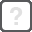
<style>
.page{position:relative;width:32px;height:32px;background:#ffffff}
.page>*{position:absolute;margin:0}
.t1{font:24.5px "Helvetica-Bold";color:#e1e1e1}
</style>
<div class="page">
<p class="t1" style="left:10px;top:7px;width:13px;height:18px">?</p>
</div>
